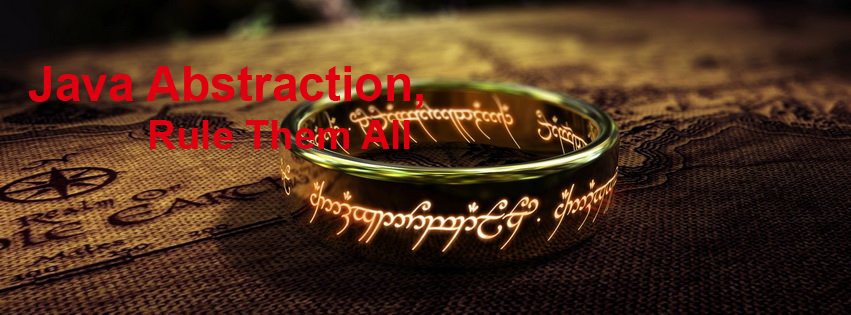
<style>
.page{position:relative;width:851px;height:315px}
.page>*{position:absolute;margin:0}
.t1{font:48px "Arial-BoldMT";color:#e10010}
.t2{font:40px "Arial-BoldMT";color:#e10010}
</style>
<div class="page">
<p class="t1" style="left:28px;top:66px;width:395px;height:83px">Java Abstraction,<br><span class="t2">    Rule Them All</span></p>
</div>
